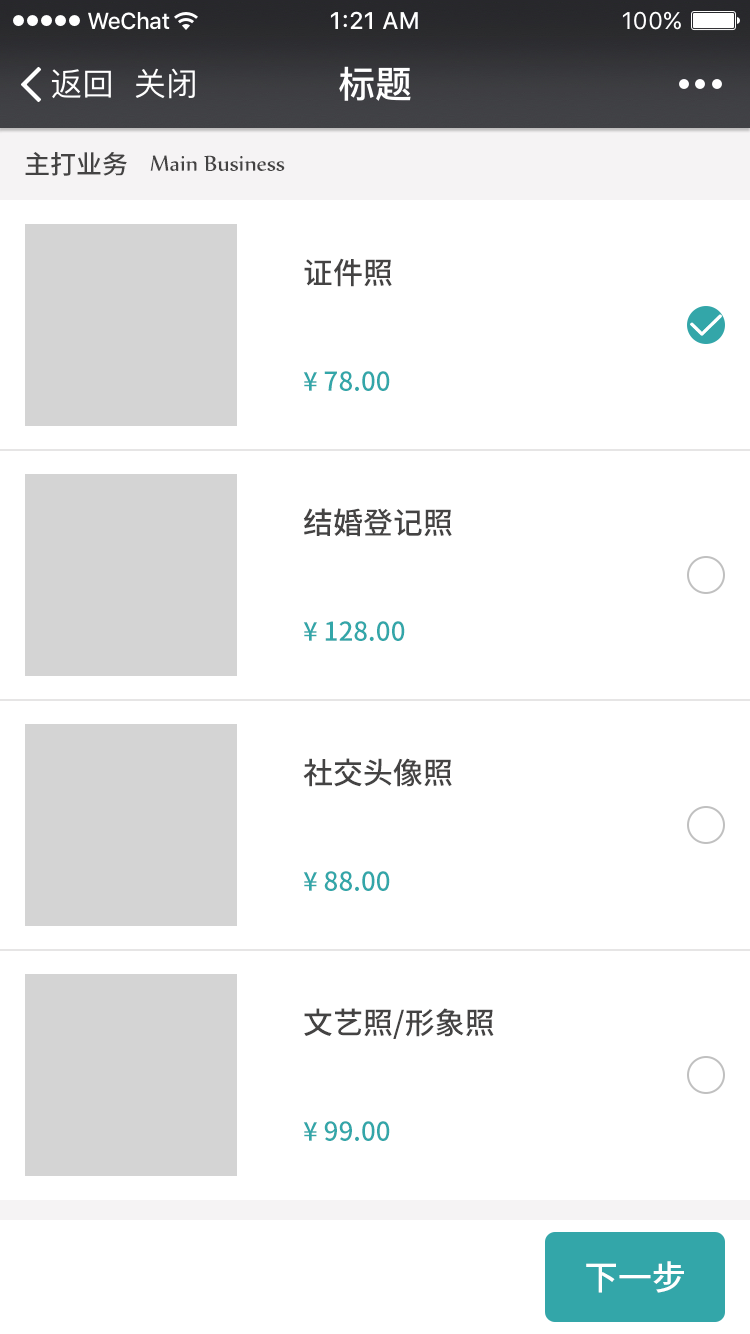
<style>
.page{position:relative;width:750px;height:1334px;background:#ffffff}
.page>*{position:absolute;margin:0}
.t1{font:26px "NotoSansCJK-Medium";color:#444343}
.t2{font:26px "Nyala-Regular";color:#444343}
.t3{font:30px "NotoSansCJK-Medium";color:#444343}
.t4{font:26px "NotoSansCJK-Medium";color:#33a6a9}
.t5{font:34px "NotoSansCJK-Medium";color:#ffffff}
</style>
<div class="page">
<p class="t1" style="left:25px;top:152px;width:102px;height:24px">主打业务</p>
<p class="t2" style="left:150px;top:155px;width:135px;height:16px">Main Business</p>
<p class="t3" style="left:304px;top:258px;width:88px;height:29px">证件照</p>
<p class="t4" style="left:303px;top:371px;width:87px;height:20px">¥ 78.00</p>
<p class="t3" style="left:303px;top:508px;width:149px;height:29px">结婚登记照</p>
<p class="t4" style="left:303px;top:621px;width:102px;height:20px">¥ 128.00</p>
<p class="t3" style="left:303px;top:758px;width:149px;height:29px">社交头像照</p>
<p class="t4" style="left:303px;top:871px;width:87px;height:20px">¥ 88.00</p>
<p class="t3" style="left:304px;top:1008px;width:190px;height:31px">文艺照/形象照</p>
<p class="t4" style="left:303px;top:1121px;width:87px;height:20px">¥ 99.00</p>
<p class="t5" style="left:586px;top:1261px;width:98px;height:32px">下一步</p>
</div>
